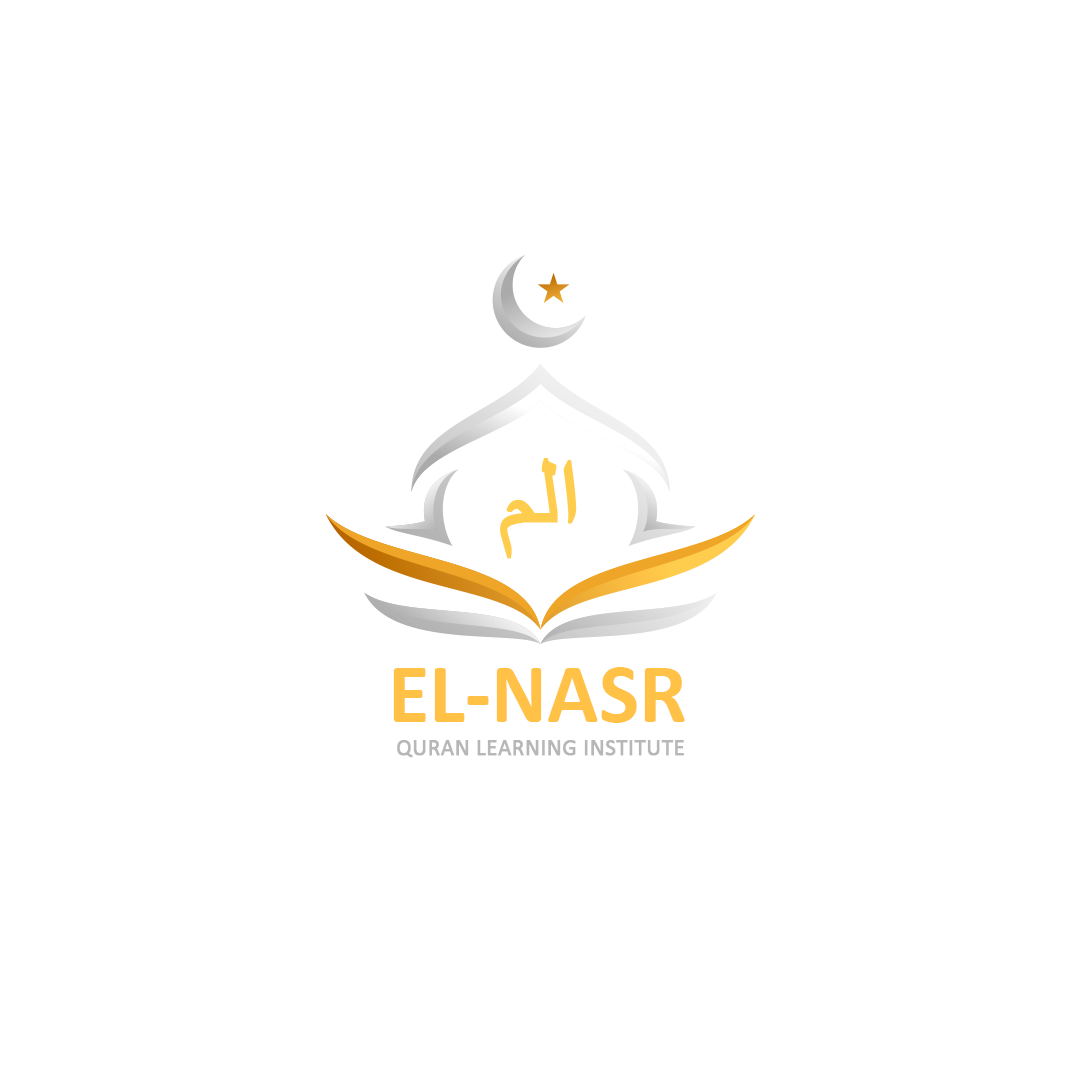
<style>
.page{position:relative;width:1080px;height:1080px;background:#ffffff}
.page>*{position:absolute;margin:0}
.t1{font:98.9px "SimplifiedArabic";color:#ffcd4d;font-weight:bold}
.t2{font:85px "Calibri-Bold";color:#ffc246}
.t3{font:23px "Calibri";color:#b7b7b7;font-weight:bold}
</style>
<div class="page">
<p class="t1" style="left:500px;top:458px;width:77px;height:101px">الم</p>
<p class="t2" style="left:393px;top:667px;width:292px;height:56px">EL-NASR</p>
<p class="t3" style="left:397px;top:740px;width:287px;height:18px">QURAN LEARNING INSTITUTE</p>
</div>
